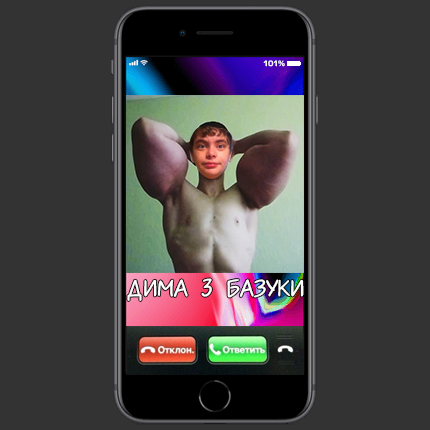
<style>
.page{position:relative;width:430px;height:430px;background:#333333}
.page>*{position:absolute;margin:0}
.t1{font:7px "Eurostile-Demi";color:#ffffff}
.t2{font:25px "IrinaCTT";color:#ffffff}
</style>
<div class="page">
<p class="t1" style="left:263px;top:60px;width:22px;height:7px">101%</p>
<p class="t2" style="left:127px;top:278px;width:177px;height:23px">ДИМА 3 БАЗУКИ</p>
</div>
